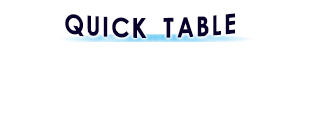
<style>
.page{position:relative;width:312px;height:120px;background:#ffffff}
.page>*{position:absolute;margin:0}
.t1{font:25px "¹ã½Ý¾ÓÃÔÄã×Ö¿â";letter-spacing:0.1em;color:#070029;scale:0.9 1}
</style>
<div class="page">
<p class="t1" style="left:65px;top:13px;width:170px;height:25px">QUICK TABLE</p>
</div>
